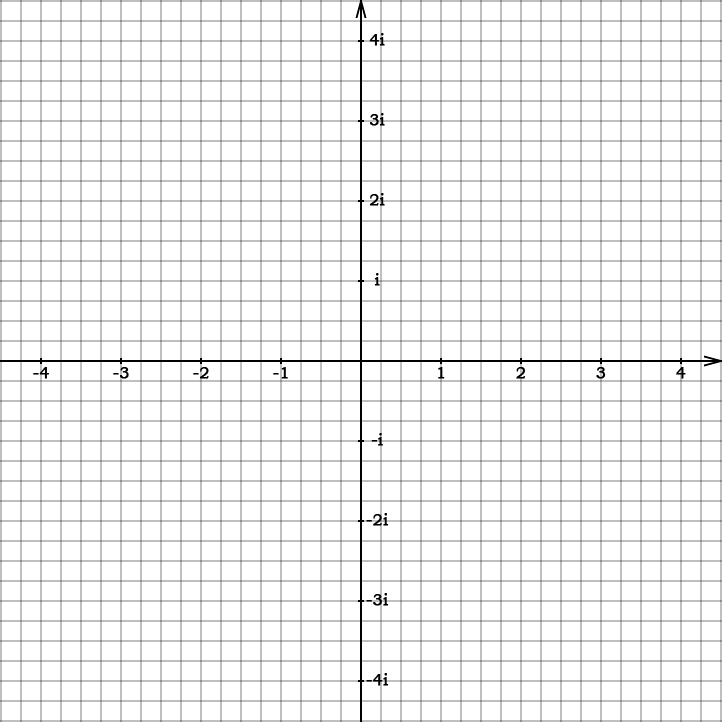
<style>
.page{position:relative;width:722px;height:722px;background:#ffffff}
.page>*{position:absolute;margin:0}
.t1{font:16px "BookmanOldStyle";color:#000000;font-weight:bold}
</style>
<div class="page">
<p class="t1" style="left:369px;top:33px;width:16px;height:13px">4i</p>
<p class="t1" style="left:370px;top:113px;width:15px;height:13px">3i</p>
<p class="t1" style="left:369px;top:193px;width:16px;height:13px">2i</p>
<p class="t1" style="left:374px;top:273px;width:6px;height:13px">i</p>
<p class="t1" style="left:33px;top:367px;width:16px;height:12px">-4</p>
<p class="t1" style="left:113px;top:367px;width:16px;height:12px">-3</p>
<p class="t1" style="left:193px;top:367px;width:16px;height:12px">-2</p>
<p class="t1" style="left:273px;top:367px;width:15px;height:12px">-1</p>
<p class="t1" style="left:438px;top:367px;width:7px;height:12px">1</p>
<p class="t1" style="left:516px;top:367px;width:9px;height:12px">2</p>
<p class="t1" style="left:596px;top:367px;width:10px;height:12px">3</p>
<p class="t1" style="left:676px;top:367px;width:10px;height:12px">4</p>
<p class="t1" style="left:371px;top:433px;width:12px;height:13px">-i</p>
<p class="t1" style="left:366px;top:513px;width:23px;height:13px">-2i</p>
<p class="t1" style="left:366px;top:593px;width:23px;height:13px">-3i</p>
<p class="t1" style="left:366px;top:673px;width:23px;height:13px">-4i</p>
</div>
